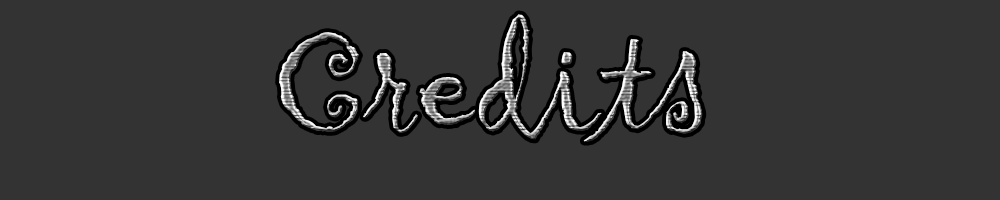
<style>
.page{position:relative;width:1000px;height:200px;background:#333333}
.page>*{position:absolute;margin:0}
.t1{font:148.2px "Gigi-Regular"}
</style>
<div class="page">
<p class="t1" style="left:279px;top:14px;width:424px;height:128px">Credits</p>
</div>
